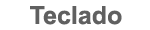
<style>
.page{position:relative;width:150px;height:30px;background:#ffffff}
.page>*{position:absolute;margin:0}
.t1{font:25px "Arial-BoldMT";color:#606060}
</style>
<div class="page">
<p class="t1" style="left:30px;top:6px;width:92px;height:19px">Teclado</p>
</div>
